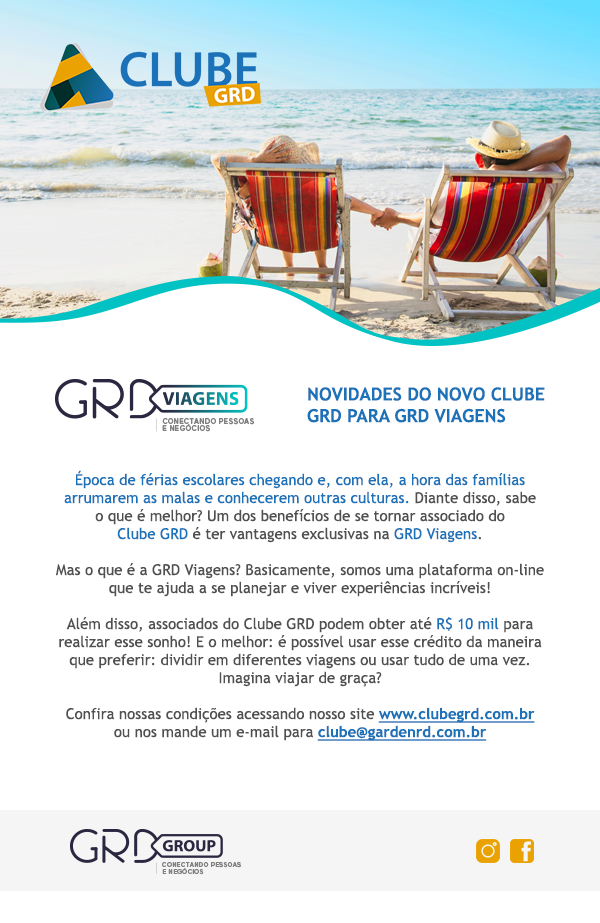
<style>
.page{position:relative;width:600px;height:923px;background:#ffffff}
.page>*{position:absolute;margin:0}
.t1{font:18px "TrebuchetMS-Bold";color:#1b72b8;text-transform:uppercase}
.t2{font:15px "TrebuchetMS";color:#505050}
.t3{font:15px "TrebuchetMS";color:#1b72b8}
.t4{font:15px "TrebuchetMS-Bold";color:#1b72b8;text-decoration:underline}
</style>
<div class="page">
<p class="t1" style="left:307px;top:387px;width:238px;height:36px">Novidades do NOVO CLUBE<br>GRD para GRD VIAGENS</p>
<p class="t2" style="left:56px;top:470px;width:488px;height:271px;text-align:center"><span class="t3">Época de férias escolares chegando e, com ela, a hora das famílias<br>arrumarem as malas e conhecerem outras culturas.</span> Diante disso, sabe<br>o que é melhor? Um dos benefícios de se tornar associado do<br><span class="t3">Clube GRD</span> é ter vantagens exclusivas na <span class="t3">GRD Viagens</span>. <br><br>Mas o que é a GRD Viagens? Basicamente, somos uma plataforma on-line que te ajuda a se planejar e viver experiências incríveis!<br><br>Além disso, associados do Clube GRD podem obter até <span class="t3">R$ 10 mil</span> para realizar esse sonho! E o melhor: é possível usar esse crédito da maneira que preferir: dividir em diferentes viagens ou usar tudo de uma vez. Imagina viajar de graça? <br><br>Confira nossas condições acessando nosso site <span class="t4">www.clubegrd.com.br</span><br>ou nos mande um e-mail para <span class="t4">clube@gardenrd.com.br</span></p>
</div>
